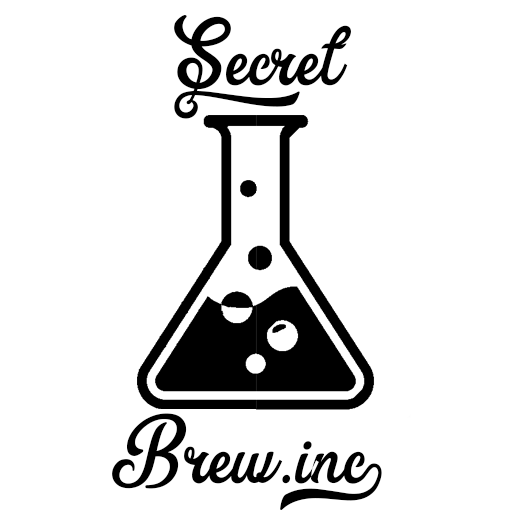
<style>
.page{position:relative;width:512px;height:512px;background:#ffffff}
.page>*{position:absolute;margin:0}
.t1{font:120px "TheHumber";color:#000000}
</style>
<div class="page">
<p class="t1" style="left:174px;top:15px;width:177px;height:104px">Secret</p>
<p class="t1" style="left:112px;top:413px;width:270px;height:97px">Brew.inc</p>
</div>
